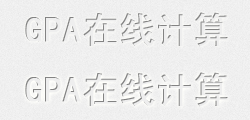
<style>
.page{position:relative;width:250px;height:120px;background:#eeeeee}
.page>*{position:absolute;margin:0}
.t1{font:36px "SimHei";letter-spacing:0.005em;color:#eeeeee;font-weight:bold}
</style>
<div class="page">
<p class="t1" style="left:25px;top:12px;width:203px;height:35px">GPA在线计算</p>
<p class="t1" style="left:25px;top:72px;width:203px;height:35px">GPA在线计算</p>
</div>
